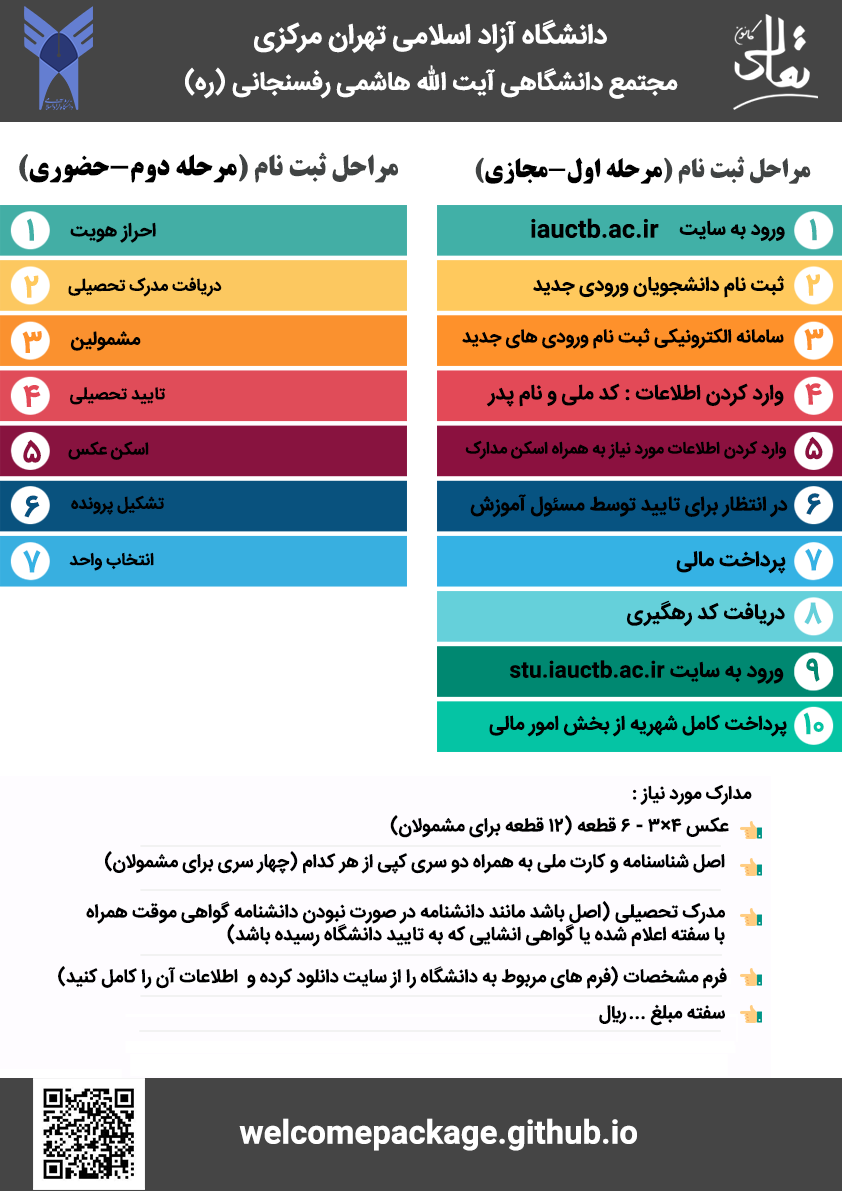
<style>
.page{position:relative;width:842px;height:1191px;background:#ffffff}
.page>*{position:absolute;margin:0}
.t1{font:27.8px "IRANSans-Bold";color:#ffffff}
.t2{font:25.2px "IRANSans-Bold";color:#ffffff}
.t3{font:28.2px "BTitrBold";color:#414444}
.t4{font:28.2px "BTitrBold";color:#000000}
.t5{font:25.9px "BTitrBold";color:#414444}
.t6{font:25.9px "BTitrBold";color:#000000}
.t7{font:31.4px "IRANSans-Bold";color:#41b0a7}
.t8{font:19.1px "IRANSans-Bold";color:#000000}
.t9{font:23.6px "IRANSans-Bold";color:#000000}
.t10{font:19.8px "IRANSans-Bold";color:#000000}
.t11{font:30.7px "IRANSans-Bold";color:#41b0a7}
.t12{font:31.4px "IRANSans-Bold";color:#ffc95d}
.t13{font:17.2px "IRANSans-Bold";color:#000000}
.t14{font:30.7px "IRANSans-Bold";color:#ffc95d}
.t15{font:18.7px "IRANSans-Bold";color:#000000}
.t16{font:30.7px "IRANSans-Bold";color:#fe912b}
.t17{font:31.4px "IRANSans-Bold";color:#fe912b}
.t18{font:31.4px "IRANSans-Bold";color:#e34957}
.t19{font:20.8px "IRANSans-Bold";color:#000000}
.t20{font:30.7px "IRANSans-Bold";color:#e34957}
.t21{font:30.7px "IRANSans-Bold";color:#8b113f}
.t22{font:31.4px "IRANSans-Bold";color:#8b113f}
.t23{font:16.7px "IRANSans-Bold";color:#000000}
.t24{font:31.4px "IRANSans-Bold";color:#075381}
.t25{font:20px "IRANSans-Bold";color:#000000}
.t26{font:30.7px "IRANSans-Bold";color:#075381}
.t27{font:31.4px "IRANSans-Bold";color:#35b2e4}
.t28{font:21.3px "IRANSans-Bold";color:#000000}
.t29{font:30.7px "IRANSans-Bold";color:#35b2e4}
.t30{font:30.7px "IRANSans-Bold";color:#65d0da}
.t31{font:30.7px "IRANSans-Bold";color:#008871}
.t32{font:30.7px "IRANSans-Bold";color:#05c4a4}
.t33{font:18.3px "IRANSans-Bold";color:#000000}
.t34{font:18.8px "IRANSans-Bold";color:#000000}
.t35{font:18.6px "IRANSans-Bold";color:#000000}
.t36{font:18.9px "IRANSans-Bold";color:#000000}
.t37{font:30.6px "IRANSans-Bold";color:#ffffff}
</style>
<div class="page">
<p class="t1" style="left:254px;top:19px;width:353px;height:34px">دانشگاه آزاد اسلامی تهران مرکزی</p>
<p class="t2" style="left:185px;top:65px;width:493px;height:34px">مجتمع دانشگاهی آیت الله هاشمی رفسنجانی (ره)</p>
<p class="t3" style="left:19px;top:152px;width:379px;height:31px">مراحل ثبت نام (<span class="t4">مرحله دوم-حضوری</span>)</p>
<p class="t5" style="left:475px;top:156px;width:336px;height:28px">مراحل ثبت نام (<span class="t6">مرحله اول-مجازی</span>)</p>
<p class="t7" style="left:27px;top:218px;width:7px;height:23px">۱</p>
<p class="t8" style="left:70px;top:222px;width:86px;height:21px">احراز هویت</p>
<p class="t9" style="left:531px;top:218px;width:128px;height:20px">iauctb.ac.ir</p>
<p class="t10" style="left:679px;top:220px;width:106px;height:22px">ورود به سایت</p>
<p class="t11" style="left:809px;top:218px;width:8px;height:23px">۱</p>
<p class="t12" style="left:24px;top:275px;width:15px;height:23px">۲</p>
<p class="t13" style="left:68px;top:277px;width:154px;height:20px">دریافت مدرک تحصیلی</p>
<p class="t10" style="left:533px;top:275px;width:251px;height:23px">ثبت نام دانشجویان ورودی جدید</p>
<p class="t14" style="left:806px;top:274px;width:14px;height:22px">۲</p>
<p class="t15" style="left:462px;top:328px;width:322px;height:21px">سامانه الکترونیکی ثبت نام ورودی های جدید</p>
<p class="t16" style="left:804px;top:328px;width:20px;height:22px">۳</p>
<p class="t17" style="left:22px;top:331px;width:20px;height:22px">۳</p>
<p class="t8" style="left:70px;top:331px;width:71px;height:20px">مشمولین</p>
<p class="t18" style="left:23px;top:385px;width:18px;height:22px">4</p>
<p class="t13" style="left:70px;top:387px;width:96px;height:18px">تایید تحصیلی</p>
<p class="t19" style="left:486px;top:383px;width:298px;height:24px">وارد کردن اطلاعات : کد ملی و نام پدر</p>
<p class="t20" style="left:805px;top:383px;width:17px;height:22px">4</p>
<p class="t21" style="left:805px;top:436px;width:18px;height:24px">۵</p>
<p class="t22" style="left:23px;top:439px;width:18px;height:24px">۵</p>
<p class="t13" style="left:68px;top:441px;width:81px;height:19px">اسکن عکس</p>
<p class="t23" style="left:465px;top:440px;width:321px;height:20px">وارد کردن اطلاعات مورد نیاز به همراه اسکن مدارک</p>
<p class="t24" style="left:24px;top:495px;width:16px;height:23px">۶</p>
<p class="t13" style="left:71px;top:495px;width:94px;height:20px">تشکیل پرونده</p>
<p class="t25" style="left:470px;top:494px;width:318px;height:24px">در انتظار برای تایید توسط مسئول آموزش</p>
<p class="t26" style="left:806px;top:493px;width:15px;height:22px">۶</p>
<p class="t27" style="left:23px;top:550px;width:18px;height:23px">۷</p>
<p class="t13" style="left:69px;top:552px;width:85px;height:19px">انتخاب واحد</p>
<p class="t28" style="left:676px;top:550px;width:110px;height:24px">پرداخت مالی</p>
<p class="t29" style="left:805px;top:548px;width:17px;height:23px">۷</p>
<p class="t28" style="left:627px;top:600px;width:158px;height:27px">دریافت کد رهگیری</p>
<p class="t30" style="left:804px;top:602px;width:18px;height:23px">۸</p>
<p class="t28" style="left:509px;top:660px;width:275px;height:24px">ورود به سایت stu.iauctb.ac.ir</p>
<p class="t31" style="left:806px;top:658px;width:14px;height:24px">۹</p>
<p class="t32" style="left:803px;top:712px;width:21px;height:23px">10</p>
<p class="t25" style="left:489px;top:714px;width:298px;height:23px">پرداخت کامل شهریه از بخش امور مالی</p>
<p class="t33" style="left:632px;top:784px;width:120px;height:21px">مدارک مورد نیاز‌ :‌</p>
<p class="t34" style="left:390px;top:815px;width:339px;height:23px">عکس 4×3 - 6 قطعه (12 قطعه برای مشمولان)</p>
<p class="t35" style="left:105px;top:851px;width:620px;height:23px">اصل شناسنامه و کارت ملی به همراه دو سری کپی از هر کدام (چهار سری برای مشمولان)</p>
<p class="t36" style="left:86px;top:901px;width:639px;height:46px">مدرک تحصیلی (اصل باشد مانند دانشنامه در صورت نبودن دانشنامه گواهی موقت همراه <br>با سفته اعلام شده یا گواهی انشایی که به تایید دانشگاه رسیده باشد)</p>
<p class="t15" style="left:58px;top:966px;width:669px;height:23px">فرم مشخصات (فرم های مربوط به دانشگاه را از سایت دانلود کرده و  اطلاعات آن را کامل کنید)</p>
<p class="t34" style="left:599px;top:1004px;width:126px;height:22px">سفته مبلغ ... ريال</p>
<p class="t37" style="left:239px;top:1118px;width:398px;height:33px">welcomepackage.github.io</p>
</div>
